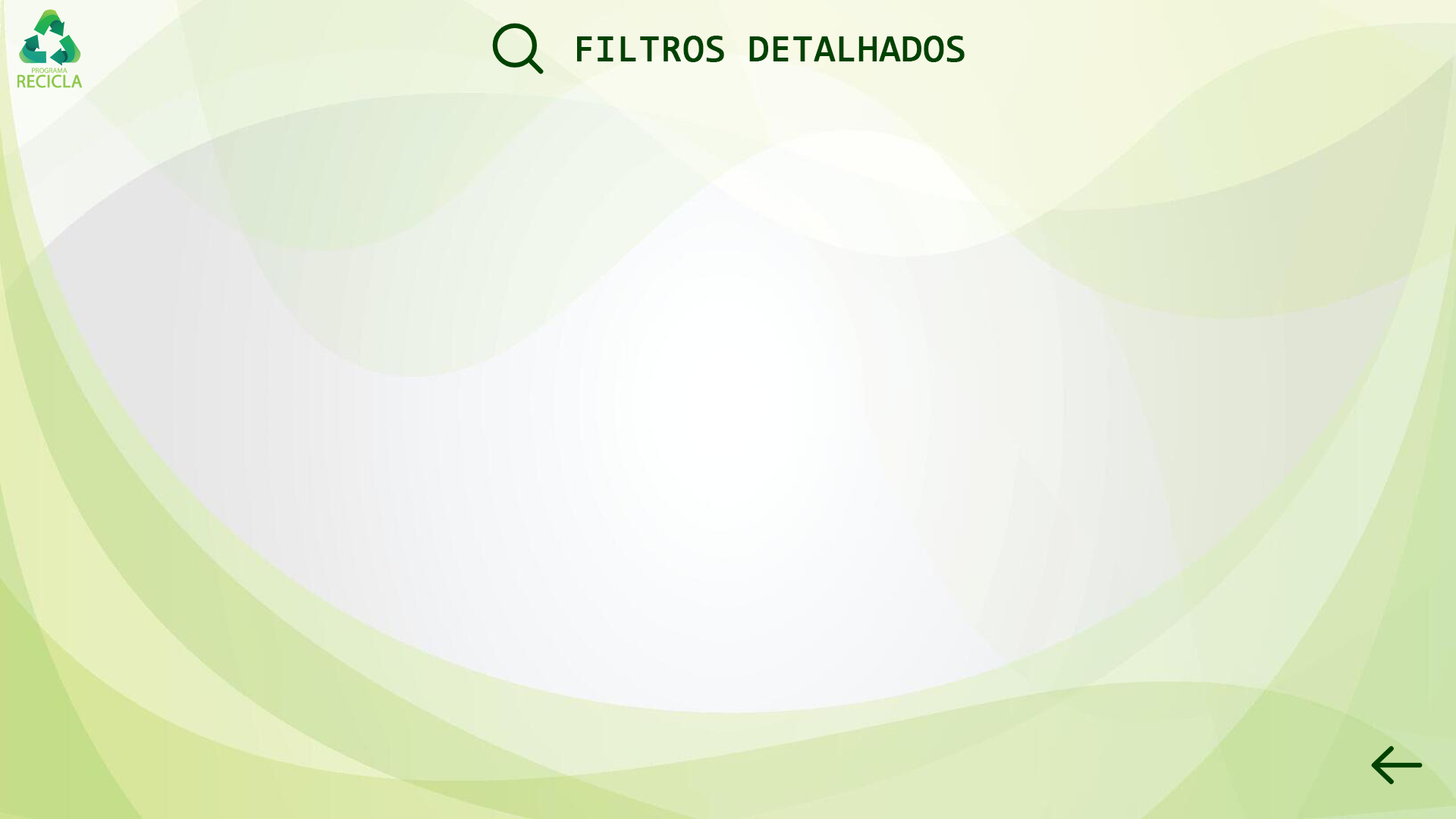
<style>
.page{position:relative;width:1456px;height:819px}
.page>*{position:absolute;margin:0}
.t1{font:37.9px "Consolas";color:#004201;font-weight:bold}
</style>
<div class="page">
<p class="t1" style="left:577px;top:36px;width:388px;height:26px">FILTROS DETALHADOS</p>
</div>
